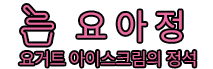
<style>
.page{position:relative;width:213px;height:69px;background:#ffffff}
.page>*{position:absolute;margin:0}
.t1{font:17.8px "Pretendard-Regular";color:#ec6ca2}
</style>
<div class="page">
<p class="t1" style="left:19px;top:51px;width:177px;height:16px">요거트 아이스크림의 정석</p>
</div>
